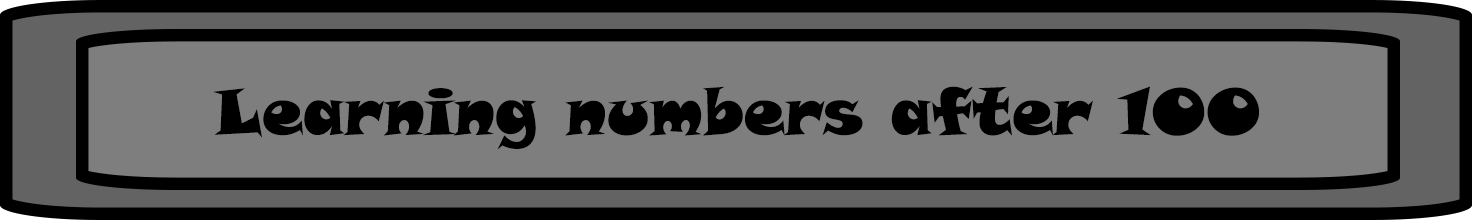
<style>
.page{position:relative;width:1472px;height:220px;background:#7e7e7e}
.page>*{position:absolute;margin:0}
.t1{font:65px "SnapITC-Regular";color:#000000}
</style>
<div class="page">
<p class="t1" style="left:213px;top:86px;width:1046px;height:64px">Learning numbers after 100</p>
</div>
